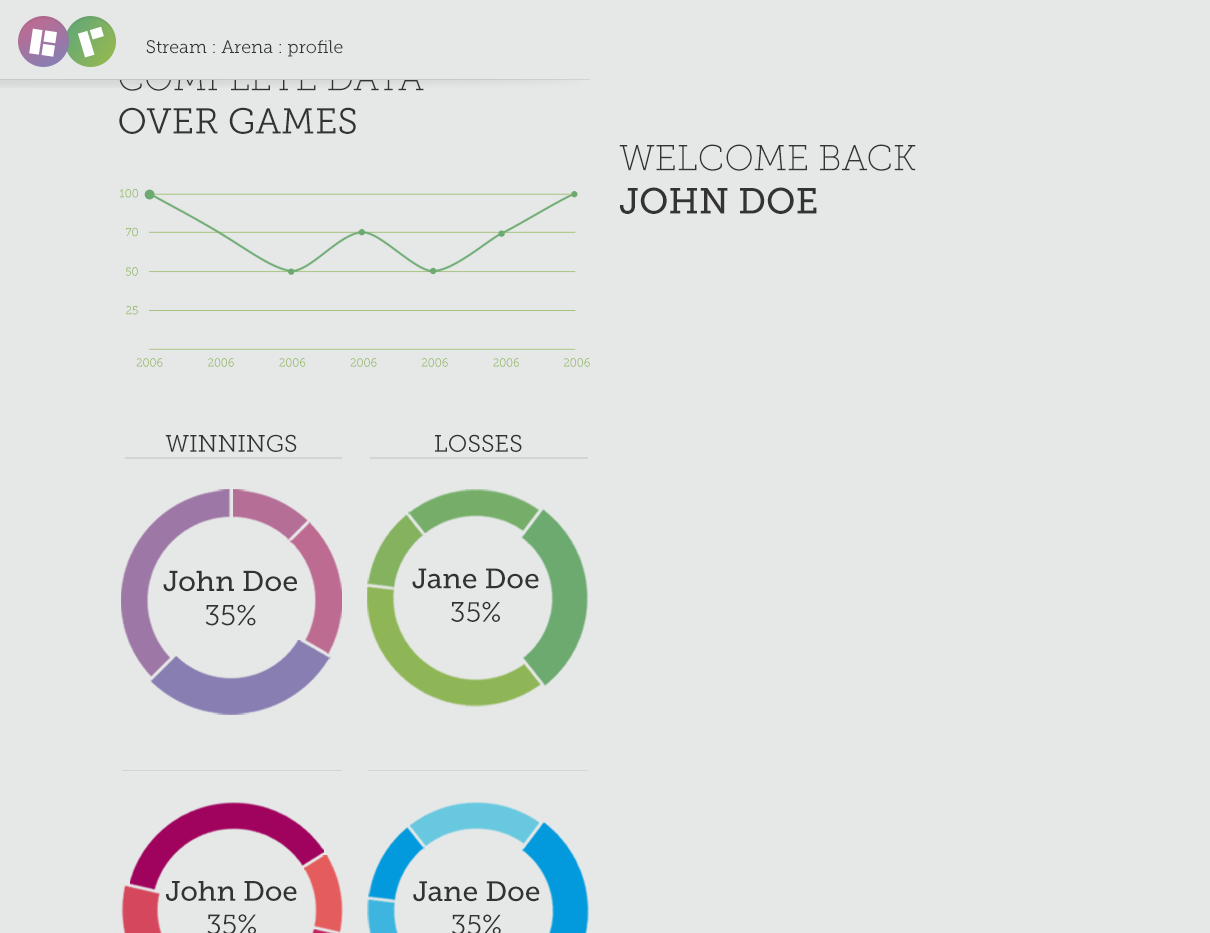
<style>
.page{position:relative;width:1210px;height:933px;background:#e6e8e8}
.page>*{position:absolute;margin:0}
.t1{font:18px "MuseoSlab-300";color:#333333}
.t2{font:36px "MuseoSlab-100";color:#333333}
.t3{font:36px "MuseoSlab-300";color:#333333}
.t4{font:36px "MuseoSlab-500";color:#333333}
.t5{font:11.3px "MuseoSlab-300"}
.t6{font:11.3px "MuseoSlab-300";color:#8fb656}
.t7{font:23.8px "MuseoSlab-300";color:#333333}
.t8{font:28px "MuseoSlab-500";color:#333333}
.t9{font:28px "MuseoSlab-300";color:#333333}
.t10{font:28.6px "MuseoSlab-500";color:#333333}
.t11{font:28.6px "MuseoSlab-300";color:#333333}
</style>
<div class="page">
<p class="t1" style="left:146px;top:40px;width:197px;height:17px">Stream : Arena : profile</p>
<p class="t2" style="left:119px;top:64px;width:305px;height:70px">COMPLETE DATA<br><span class="t3">OVER GAMES</span></p>
<p class="t2" style="left:619px;top:144px;width:297px;height:70px">WELCOME BACK<br><span class="t4">JOHN DOE</span></p>
<p class="t5" style="left:120px;top:189px;width:18px;height:9px">100</p>
<p class="t6" style="left:126px;top:227px;width:12px;height:10px">70</p>
<p class="t5" style="left:126px;top:267px;width:12px;height:9px">50</p>
<p class="t6" style="left:126px;top:306px;width:12px;height:9px">25</p>
<p class="t5" style="left:136px;top:358px;width:27px;height:9px">2006</p>
<p class="t5" style="left:208px;top:358px;width:26px;height:9px">2006</p>
<p class="t6" style="left:279px;top:358px;width:27px;height:9px">2006</p>
<p class="t5" style="left:350px;top:358px;width:27px;height:9px">2006</p>
<p class="t5" style="left:422px;top:358px;width:26px;height:9px">2006</p>
<p class="t5" style="left:493px;top:358px;width:26px;height:9px">2006</p>
<p class="t5" style="left:564px;top:358px;width:26px;height:9px">2006</p>
<p class="t7" style="left:165px;top:434px;width:132px;height:18px">WINNINGS</p>
<p class="t7" style="left:435px;top:434px;width:87px;height:18px">LOSSES</p>
<p class="t8" style="left:412px;top:568px;width:127px;height:54px;text-align:center">Jane Doe<br><span class="t9">35%</span></p>
<p class="t10" style="left:163px;top:570px;width:134px;height:56px;text-align:center">John Doe<br><span class="t11">35%</span></p>
<p class="t8" style="left:166px;top:881px;width:131px;height:54px;text-align:center">John Doe<br><span class="t9">35%</span></p>
<p class="t8" style="left:413px;top:881px;width:127px;height:54px;text-align:center">Jane Doe<br><span class="t9">35%</span></p>
</div>
